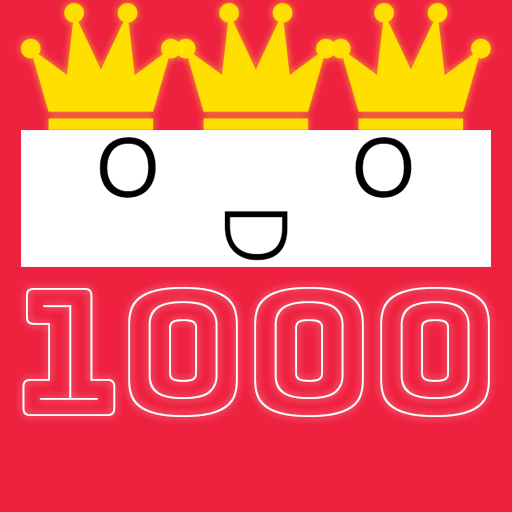
<style>
.page{position:relative;width:512px;height:512px;background:#ee213f}
.page>*{position:absolute;margin:0}
.t1{font:173.3px "BungeeOutline-Regular";color:#ffffff}
</style>
<div class="page">
<p class="t1" style="left:22px;top:287px;width:468px;height:130px">1000</p>
</div>
